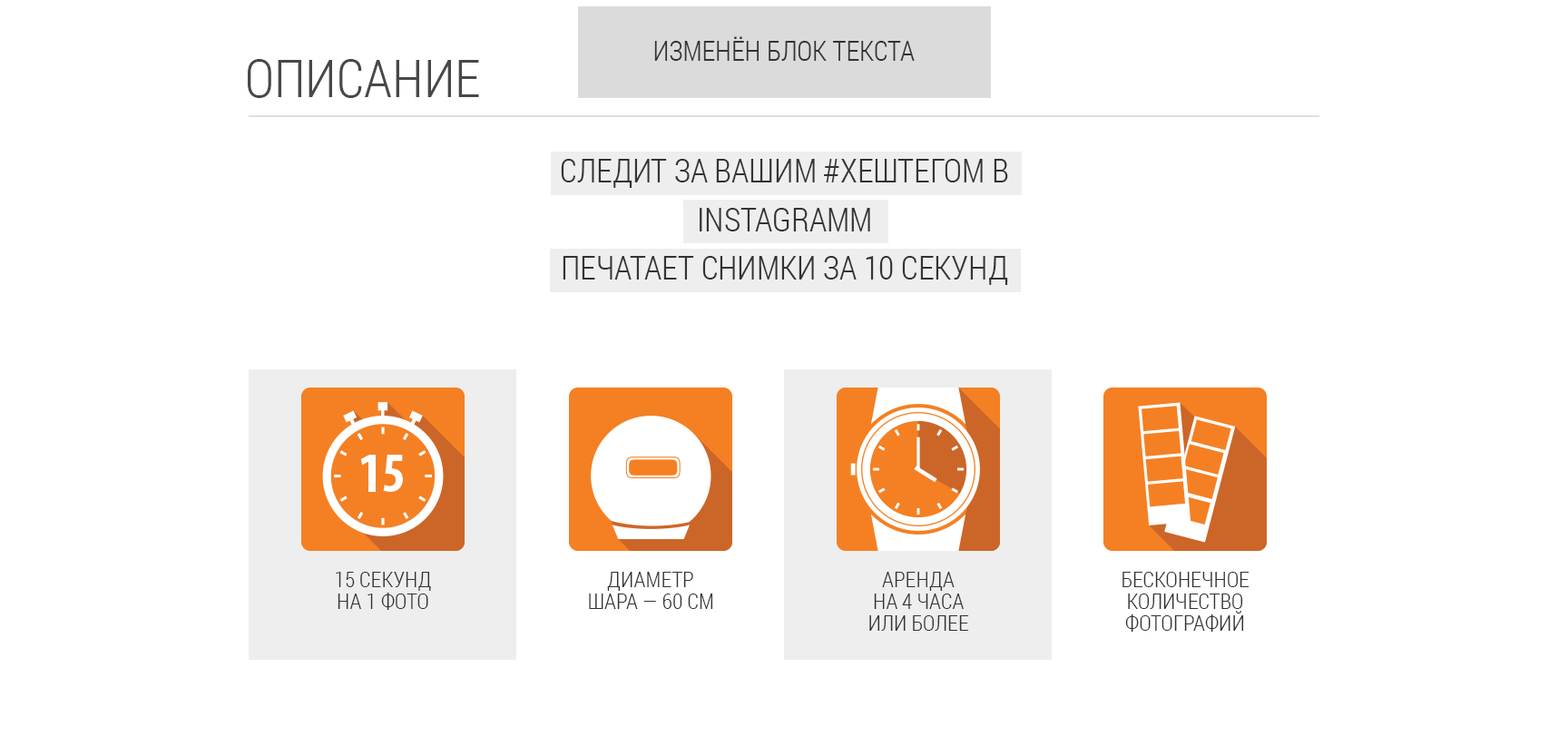
<style>
.page{position:relative;width:1568px;height:746px;background:#ffffff}
.page>*{position:absolute;margin:0}
.t1{font:27.2px "RobotoCondensed-Light";color:#333333;text-transform:uppercase}
.t2{font:52.6px "RobotoCondensed-Light";color:#484848;text-transform:uppercase}
.t3{font:32.4px/48.7px "RobotoCondensed-Light";color:#333333;text-transform:uppercase}
.t4{font:21.8px/21.8px "RobotoCondensed-Light";color:#333333;text-transform:uppercase}
</style>
<div class="page">
<p class="t1" style="left:654px;top:36px;width:261px;height:25px">изменён блок текста</p>
<p class="t2" style="left:248px;top:59px;width:231px;height:39px">описание</p>
<p class="t3" style="left:561px;top:159px;width:447px;height:126px;text-align:center">СЛЕДИТ ЗА ВАШИМ #ХЕШТЕГОМ В<br>instagramm<br>ПЕЧАТАЕТ СНИМКИ ЗА 10 СЕКУНД</p>
<p class="t4" style="left:336px;top:572px;width:95px;height:38px;text-align:center">15 секунд<br>на 1 фото</p>
<p class="t4" style="left:589px;top:572px;width:124px;height:37px;text-align:center">диаметр<br>шара — 60 см</p>
<p class="t4" style="left:869px;top:572px;width:100px;height:59px;text-align:center">аренда<br>на 4 часа<br>или более</p>
<p class="t4" style="left:1122px;top:572px;width:128px;height:60px;text-align:center">бесконечное количество фотографий</p>
</div>
